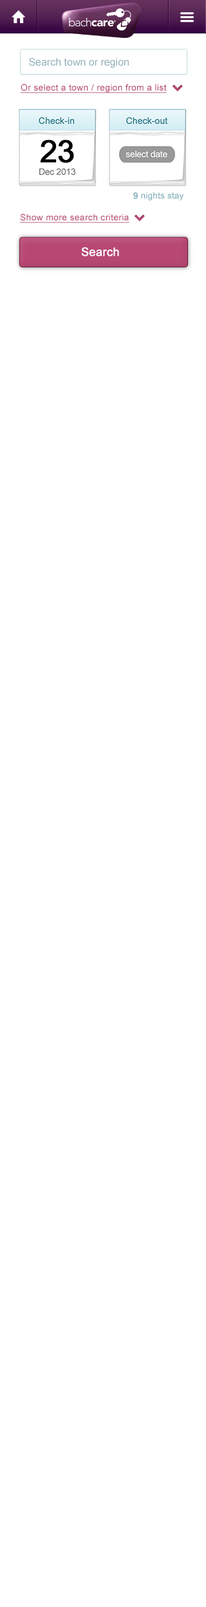
<style>
.page{position:relative;width:206px;height:1607px;background:#ffffff}
.page>*{position:absolute;margin:0}
.t1{font:10.3px "ArialMT";color:#93b1bc}
.t2{font:9px "ArialMT";letter-spacing:0.02em;color:#b74773;text-decoration:underline}
.t3{font:9px "ArialMT";color:#83b1ba}
.t4{font:9px "ArialMT";color:#83b1ba;font-weight:bold}
.t5{font:11.6px "ArialMT";color:#ffffff;font-weight:bold}
</style>
<div class="page">
<p class="t1" style="left:29px;top:58px;width:100px;height:10px">Search town or region</p>
<p class="t2" style="left:21px;top:84px;width:145px;height:9px">Or select a town / region from a list</p>
<p class="t3" style="left:133px;top:192px;width:50px;height:9px"><span class="t4">9</span> nights stay</p>
<p class="t2" style="left:20px;top:213px;width:109px;height:10px">Show more search criteria</p>
<p class="t5" style="left:81px;top:247px;width:38px;height:9px">Search</p>
</div>
